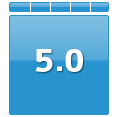
<style>
.page{position:relative;width:117px;height:117px;background:#2793cf}
.page>*{position:absolute;margin:0}
.t1{font:36px "Colaborate-Bold";color:#ffffff;text-transform:uppercase}
</style>
<div class="page">
<p class="t1" style="left:35px;top:49px;width:48px;height:23px">5.0</p>
</div>
